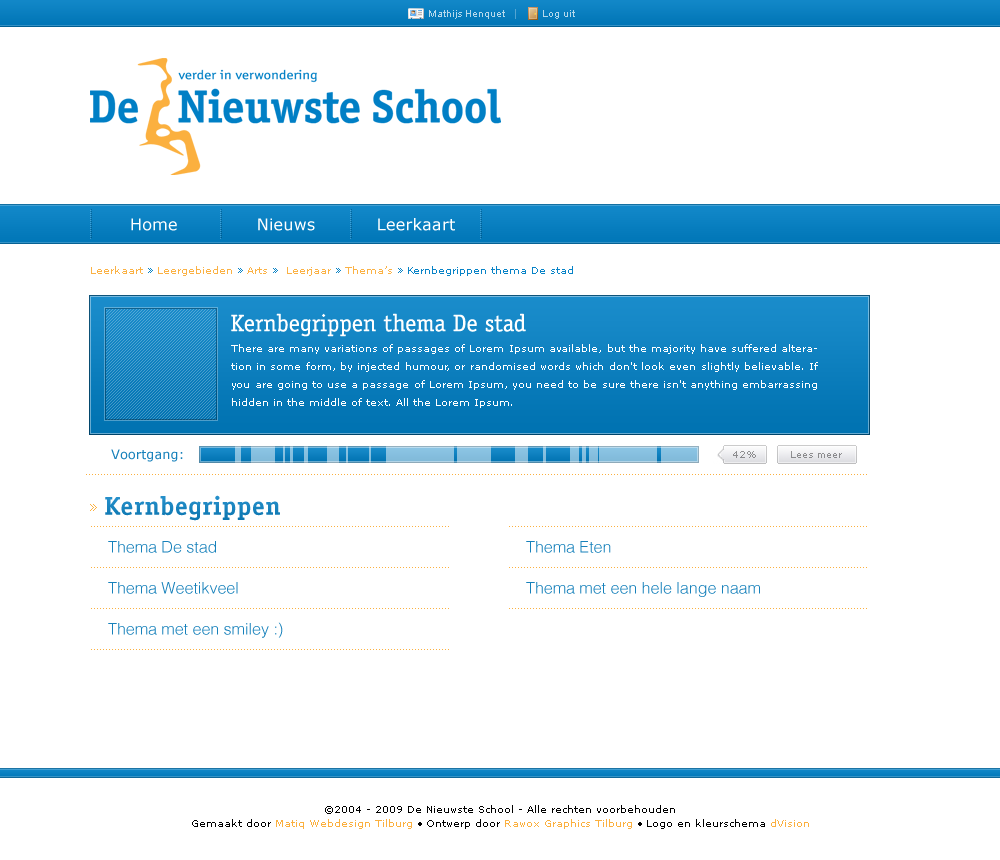
<style>
.page{position:relative;width:1000px;height:860px;background:#ffffff}
.page>*{position:absolute;margin:0}
.t1{font:10px "ArialMT";color:#b5d8ec}
.t2{font:16px "Verdana";letter-spacing:0.015em;color:#ffffff}
.t3{font:10px "Verdana";color:#007fc5}
.t4{font:10px "Verdana";color:#fbb03f}
.t5{font:24px "OfficinaSerifStd-Book";color:#ffffff}
.t6{font:10px/18px "Verdana";color:#ffffff}
.t7{font:13px "Verdana";color:#1781bb}
.t8{font:9px "Verdana";color:#8e8e8f}
.t9{font:9px "Verdana";color:#8c8c8e}
.t10{font:26px "OfficinaSerifStd-Bold";letter-spacing:0.015em;color:#0d83c4}
.t11{font:15px "Verdana";letter-spacing:0.015em;color:#fbb03f}
.t12{font:16px "HelveticaLT-Light";color:#1781bb}
.t13{font:10px/14px "Verdana";color:#000000}
.t14{font:10px/14px "Verdana";color:#fbb03f}
</style>
<div class="page">
<p class="t1" style="left:429px;top:10px;width:76px;height:9px">Mathijs Henquet</p>
<p class="t1" style="left:543px;top:10px;width:32px;height:9px">Log uit</p>
<p class="t2" style="left:131px;top:218px;width:46px;height:13px">Home</p>
<p class="t2" style="left:258px;top:218px;width:57px;height:13px">Nieuws</p>
<p class="t2" style="left:378px;top:218px;width:77px;height:13px">Leerkaart</p>
<p class="t3" style="left:91px;top:266px;width:482px;height:10px;opacity:0.97"><span class="t4">Leerkaart </span>» <span class="t4">Leergebieden </span>» <span class="t4">Arts </span>»  <span class="t4">Leerjaar </span>» <span class="t4">Thema’s </span>» Kernbegrippen thema De stad</p>
<p class="t5" style="left:231px;top:313px;width:295px;height:24px">Kernbegrippen thema De stad</p>
<p class="t6" style="left:231px;top:344px;width:587px;height:64px;text-align:justify">There are many variations of passages of Lorem Ipsum available, but the majority have suffered alteration in some form, by injected humour, or randomised words which don't look even slightly believable. If you are going to use a passage of Lorem Ipsum, you need to be sure there isn't anything embarrassing hidden in the middle of text. All the Lorem Ipsum.</p>
<p class="t7" style="left:111px;top:449px;width:72px;height:13px">Voortgang:</p>
<p class="t8" style="left:733px;top:451px;width:23px;height:7px">42%</p>
<p class="t9" style="left:791px;top:451px;width:51px;height:7px">Lees meer</p>
<p class="t10" style="left:105px;top:495px;width:175px;height:26px">Kernbegrippen</p>
<p class="t11" style="left:90px;top:504px;width:7px;height:7px">»</p>
<p class="t12" style="left:108px;top:541px;width:108px;height:12px">Thema De stad</p>
<p class="t12" style="left:526px;top:541px;width:85px;height:12px">Thema Eten</p>
<p class="t12" style="left:108px;top:582px;width:130px;height:12px">Thema Weetikveel</p>
<p class="t12" style="left:526px;top:582px;width:234px;height:15px">Thema met een hele lange naam</p>
<p class="t12" style="left:108px;top:622px;width:175px;height:16px">Thema met een smiley :)</p>
<p class="t13" style="left:192px;top:805px;width:617px;height:24px;text-align:center">©2004 - 2009 De Nieuwste School - Alle rechten voorbehouden<br>Gemaakt door <span class="t14">Matiq Webdesign Tilburg</span> • Ontwerp door <span class="t14">Rawox Graphics Tilburg</span> • Logo en kleurschema <span class="t14">dVision</span></p>
</div>
